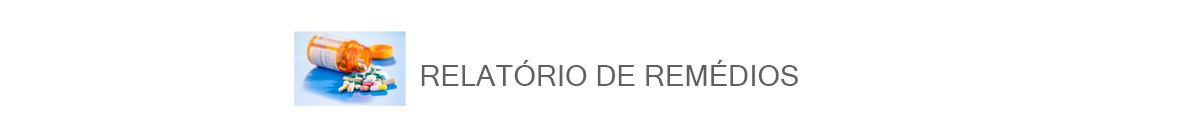
<style>
.page{position:relative;width:1192px;height:120px;background:#ffffff}
.page>*{position:absolute;margin:0}
.t1{font:29.2px "MicrosoftSansSerif";color:#606060}
</style>
<div class="page">
<p class="t1" style="left:421px;top:60px;width:377px;height:26px">RELATÓRIO DE REMÉDIOS</p>
</div>
